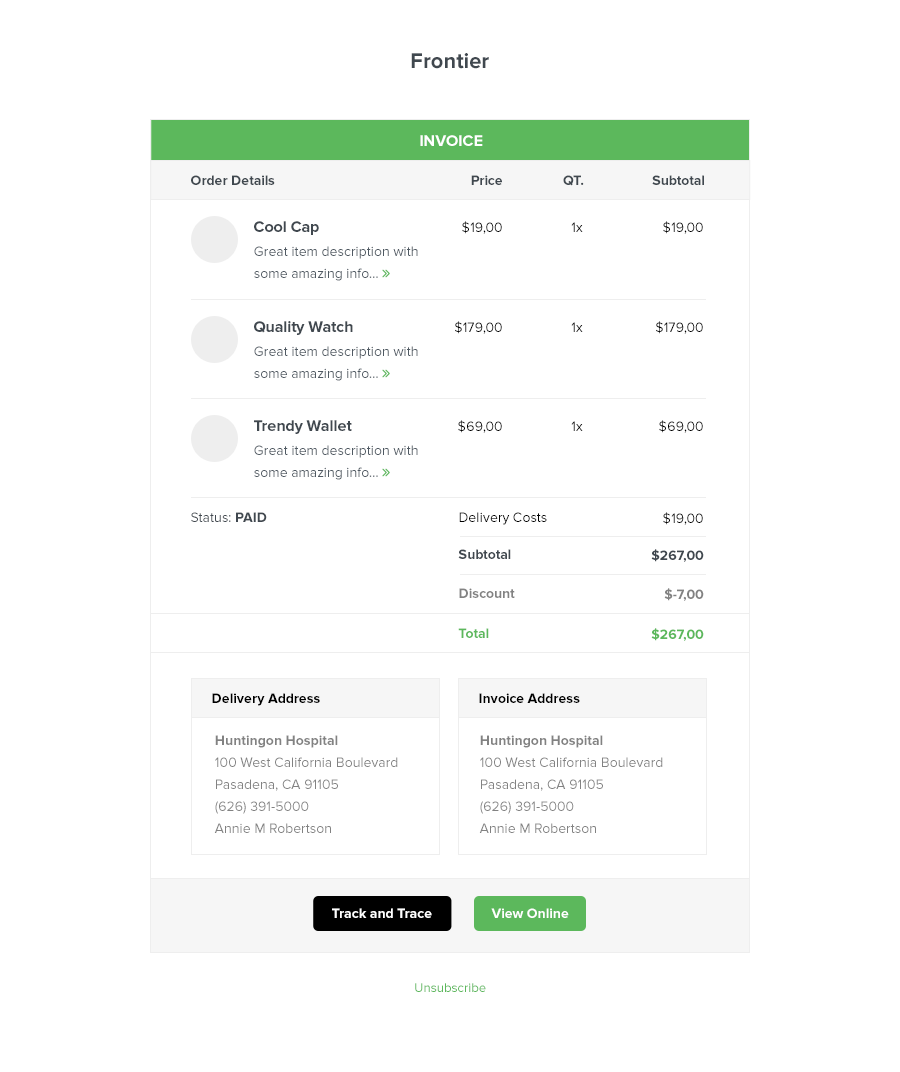
<style>
.page{position:relative;width:900px;height:1072px;background:#ffffff}
.page>*{position:absolute;margin:0}
.t1{font:22px "ProximaNova-Bold";color:#40484f}
.t2{font:16px "ProximaNova-Bold";color:#ffffff;text-transform:uppercase}
.t3{font:14px "ProximaNova-Bold";color:#40484f}
.t4{font:16px "ProximaNova-Bold";color:#40484f}
.t5{font:14px "ProximaNova-Regular";color:#000000}
.t6{font:14px "ProximaNova-Regular";color:#40484f}
.t7{font:14px "ProximaNova-Bold";color:#828282}
.t8{font:14px "ProximaNova-Bold";color:#5cb85c}
.t9{font:14px "ProximaNova-Bold";color:#000000}
.t10{font:14px/22px "ProximaNova-Regular";color:#828282}
.t11{font:14px/22px "ProximaNova-Bold";color:#828282}
.t12{font:14px "ProximaNova-Bold";color:#ffffff}
.t13{font:13.1px "ProximaNova-Regular";color:#5cb85c}
</style>
<div class="page">
<p class="t1" style="left:411px;top:53px;width:78px;height:16px">Frontier</p>
<p class="t2" style="left:420px;top:135px;width:63px;height:11px">invoice</p>
<p class="t3" style="left:191px;top:175px;width:84px;height:10px">Order Details</p>
<p class="t3" style="left:471px;top:175px;width:31px;height:10px">Price</p>
<p class="t3" style="left:563px;top:175px;width:21px;height:11px">QT.</p>
<p class="t3" style="left:652px;top:175px;width:52px;height:10px">Subtotal</p>
<p class="t4" style="left:254px;top:221px;width:65px;height:14px">Cool Cap</p>
<p class="t5" style="left:462px;top:221px;width:40px;height:13px">$19,00</p>
<p class="t5" style="left:571px;top:222px;width:12px;height:10px">1x</p>
<p class="t5" style="left:663px;top:221px;width:40px;height:13px">$19,00</p>
<p class="t4" style="left:254px;top:321px;width:99px;height:14px">Quality Watch</p>
<p class="t5" style="left:455px;top:321px;width:47px;height:13px">$179,00</p>
<p class="t5" style="left:571px;top:322px;width:12px;height:10px">1x</p>
<p class="t5" style="left:656px;top:321px;width:47px;height:13px">$179,00</p>
<p class="t4" style="left:254px;top:420px;width:98px;height:14px">Trendy Wallet</p>
<p class="t5" style="left:458px;top:420px;width:44px;height:13px">$69,00</p>
<p class="t5" style="left:571px;top:421px;width:12px;height:10px">1x</p>
<p class="t5" style="left:659px;top:420px;width:44px;height:13px">$69,00</p>
<p class="t6" style="left:191px;top:512px;width:76px;height:10px">Status: <span class="t3">PAID</span></p>
<p class="t5" style="left:459px;top:512px;width:88px;height:13px">Delivery Costs</p>
<p class="t5" style="left:663px;top:512px;width:40px;height:13px">$19,00</p>
<p class="t3" style="left:458px;top:549px;width:53px;height:10px">Subtotal</p>
<p class="t3" style="left:651px;top:549px;width:53px;height:13px">$267,00</p>
<p class="t7" style="left:459px;top:588px;width:56px;height:10px">Discount</p>
<p class="t7" style="left:664px;top:588px;width:40px;height:13px">$-7,00</p>
<p class="t8" style="left:458px;top:628px;width:31px;height:10px">Total</p>
<p class="t8" style="left:651px;top:628px;width:53px;height:13px">$267,00</p>
<p class="t9" style="left:212px;top:693px;width:108px;height:13px">Delivery Address</p>
<p class="t9" style="left:479px;top:693px;width:101px;height:10px">Invoice Address</p>
<p class="t10" style="left:214px;top:735px;width:184px;height:98px"><span class="t11">Huntingon Hospital<br></span>100 West California Boulevard<br>Pasadena, CA 91105<br>(626) 391-5000<br>Annie M Robertson</p>
<p class="t10" style="left:479px;top:735px;width:184px;height:98px"><span class="t11">Huntingon Hospital<br></span>100 West California Boulevard<br>Pasadena, CA 91105<br>(626) 391-5000<br>Annie M Robertson</p>
<p class="t12" style="left:332px;top:908px;width:100px;height:10px">Track and Trace</p>
<p class="t12" style="left:491px;top:908px;width:78px;height:10px">View Online</p>
<p class="t13" style="left:415px;top:983px;width:71px;height:9px">Unsubscribe</p>
</div>
